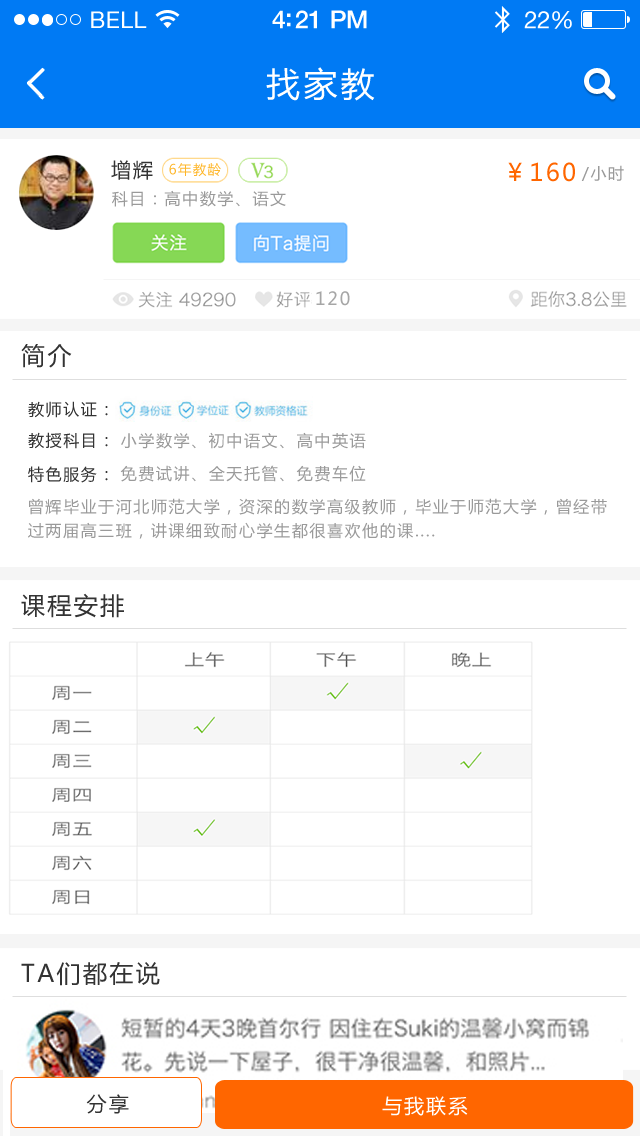
<style>
.page{position:relative;width:640px;height:1136px;background:#ffffff}
.page>*{position:absolute;margin:0}
.t1{font:23px "HelveticaNeue";letter-spacing:0.02em;color:#ffffff}
.t2{font:25px "HelveticaNeue-Medium";letter-spacing:-0.02em;color:#ffffff}
.t3{font:24px "HelveticaNeue";letter-spacing:-0.02em;color:#ffffff}
.t4{font:34px "MicrosoftYaHei";letter-spacing:0.1em;color:#ffffff}
.t5{font:20px "MicrosoftYaHei";letter-spacing:0.1em;color:#333333}
.t6{font:13.4px "MicrosoftYaHei";letter-spacing:0.1em;color:#feb629}
.t7{font:24px "MicrosoftYaHei";letter-spacing:0.1em;color:#ff6600}
.t8{font:16px "MicrosoftYaHei";letter-spacing:0.1em;color:#9a9a9a}
.t9{font:18px "MicrosoftYaHei";letter-spacing:0.1em;color:#a6a6a6}
.t10{font:24px "MicrosoftYaHei";letter-spacing:0.1em;color:#333333}
.t11{font:16px "MicrosoftYaHei";letter-spacing:0.1em;color:#333333}
.t12{font:16px/24px "MicrosoftYaHei";letter-spacing:0.1em;color:#9a9a9a}
.t13{font:20px "MicrosoftYaHei";letter-spacing:0.1em;color:#ffffff}
</style>
<div class="page">
<p class="t1" style="left:91px;top:11px;width:56px;height:17px">BELL</p>
<p class="t2" style="left:272px;top:10px;width:95px;height:19px">4:21 PM</p>
<p class="t3" style="left:524px;top:11px;width:48px;height:18px">22%</p>
<p class="t4" style="left:266px;top:67px;width:109px;height:34px">找家教</p>
<p class="t5" style="left:111px;top:160px;width:42px;height:20px">增辉</p>
<p class="t6" style="left:169px;top:163px;width:52px;height:14px">6年教龄</p>
<p class="t7" style="left:508px;top:162px;width:67px;height:20px">￥160</p>
<p class="t8" style="left:581px;top:165px;width:43px;height:16px">/小时</p>
<p class="t8" style="left:112px;top:190px;width:174px;height:17px">科目：高中数学、语文</p>
<p class="t9" style="left:316px;top:291px;width:34px;height:15px">120</p>
<p class="t10" style="left:21px;top:344px;width:51px;height:24px">简介</p>
<p class="t11" style="left:28px;top:401px;width:80px;height:17px">教师认证：</p>
<p class="t11" style="left:28px;top:432px;width:80px;height:17px">教授科目：</p>
<p class="t8" style="left:121px;top:432px;width:245px;height:17px">小学数学、初中语文、高中英语</p>
<p class="t11" style="left:28px;top:466px;width:80px;height:17px">特色服务：</p>
<p class="t8" style="left:120px;top:465px;width:246px;height:17px">免费试讲、全天托管、免费车位</p>
<p class="t12" style="left:28px;top:498px;width:579px;height:41px">曾辉毕业于河北师范大学，资深的数学高级教师，毕业于师范大学，曾经带<br>过两届高三班，讲课细致耐心学生都很喜欢他的课....</p>
<p class="t10" style="left:21px;top:593px;width:103px;height:25px">课程安排</p>
<p class="t10" style="left:21px;top:962px;width:139px;height:24px">TA们都在说</p>
<p class="t5" style="left:86px;top:1094px;width:43px;height:20px">分享</p>
<p class="t13" style="left:382px;top:1096px;width:86px;height:20px">与我联系</p>
</div>
